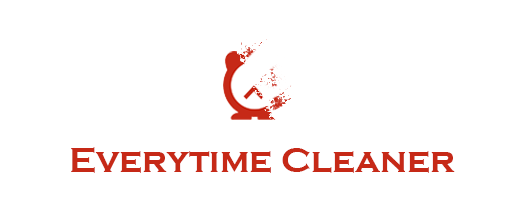
<style>
.page{position:relative;width:525px;height:213px;background:#ffffff}
.page>*{position:absolute;margin:0}
.t1{font:36px "CopperplateGothic-Bold";color:#c62917}
</style>
<div class="page">
<p class="t1" style="left:71px;top:147px;width:384px;height:26px">Everytime Cleaner</p>
</div>
